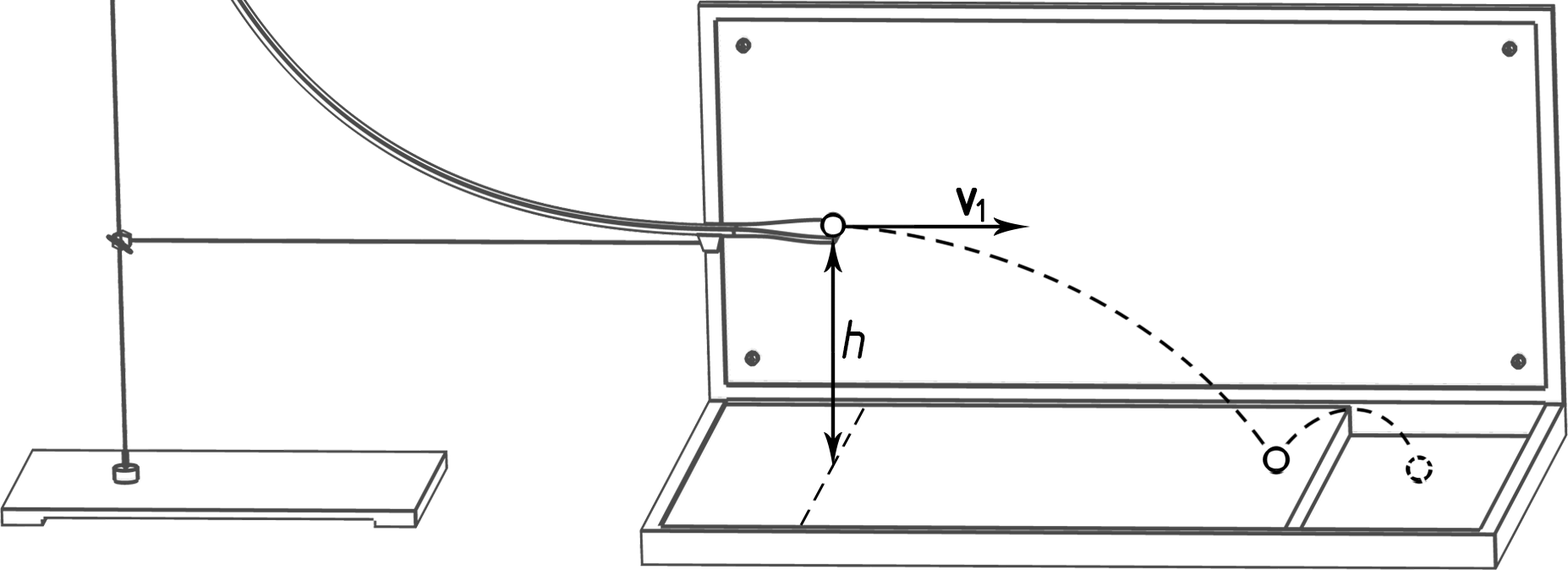
<style>
.page{position:relative;width:1568px;height:570px;background:#ffffff}
.page>*{position:absolute;margin:0}
.t1{font:56.4px "GOSTTypeB";color:#000000;font-weight:bold}
.t2{font:56.4px "GOSTTypeB";color:#000000;font-style:italic}
</style>
<div class="page">
<p class="t1" style="left:956px;top:188px;width:22px;height:28px">v</p>
<p class="t1" style="left:976px;top:199px;width:8px;height:23px">1</p>
<p class="t2" style="left:842px;top:320px;width:23px;height:39px">h</p>
</div>
